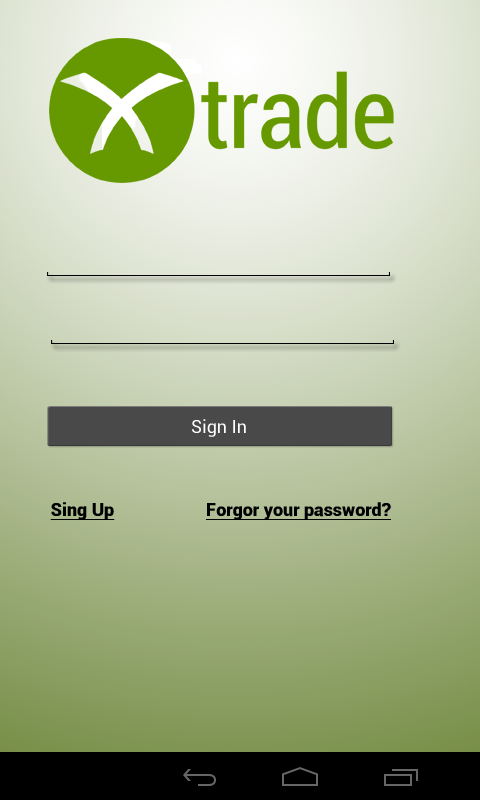
<style>
.page{position:relative;width:480px;height:800px}
.page>*{position:absolute;margin:0}
.t1{font:18px "Roboto-Regular";color:#ffffff}
.t2{font:18px "Roboto-Black";color:#000000;text-decoration:underline}
</style>
<div class="page">
<p class="t1" style="left:192px;top:419px;width:54px;height:18px">Sign In</p>
<p class="t2" style="left:50px;top:502px;width:65px;height:18px">Sing Up</p>
<p class="t2" style="left:206px;top:502px;width:185px;height:18px">Forgor your password?</p>
</div>
